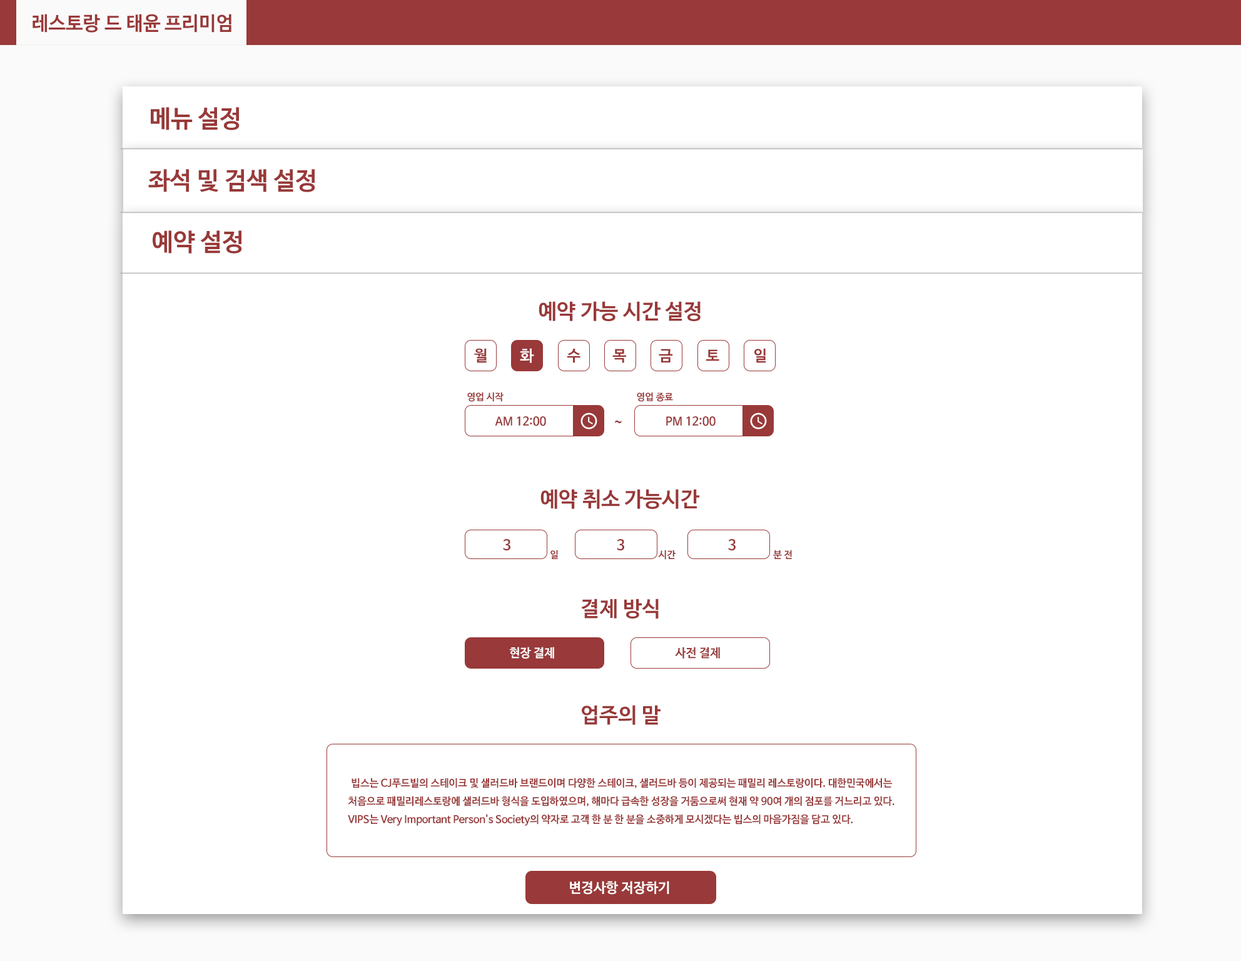
<style>
.page{position:relative;width:1241px;height:961px;background:#ffffff}
.page>*{position:absolute;margin:0}
.t1{font:19.3px "NanumBarunGothicBold";color:#993939}
.t2{font:24.5px "NanumBarunGothicBold";color:#993939}
.t3{font:21px "NanumBarunGothicBold";color:#993939}
.t4{font:15.3px "NanumBarunGothicBold";color:#993939}
.t5{font:15.3px "NanumBarunGothicBold";color:#ffffff}
.t6{font:9.6px "NanumBarunGothicBold";color:#993939}
.t7{font:11.7px "NanumBarunGothicBold";color:#993939}
.t8{font:14.2px "NanumBarunGothicBold";color:#993939}
.t9{font:12px "NanumBarunGothicBold";color:#ffffff}
.t10{font:12px "NanumBarunGothicBold";color:#993939}
.t11{font:10.3px/18px "NanumBarunGothicBold";color:#993939}
.t12{font:13.8px "NanumBarunGothicBold";color:#ffffff}
</style>
<div class="page">
<p class="t1" style="left:33px;top:14px;width:199px;height:19px">레스토랑 드 태윤 프리미엄</p>
<p class="t2" style="left:151px;top:107px;width:89px;height:23px">메뉴 설정</p>
<p class="t2" style="left:148px;top:169px;width:167px;height:23px">좌석 및 검색 설정</p>
<p class="t2" style="left:153px;top:230px;width:89px;height:23px">예약 설정</p>
<p class="t3" style="left:539px;top:301px;width:162px;height:20px">예약 가능 시간 설정</p>
<p class="t4" style="left:474px;top:348px;width:13px;height:15px">월</p>
<p class="t5" style="left:520px;top:348px;width:14px;height:15px">화</p>
<p class="t4" style="left:567px;top:349px;width:14px;height:14px">수</p>
<p class="t4" style="left:613px;top:349px;width:13px;height:14px">목</p>
<p class="t4" style="left:659px;top:349px;width:14px;height:13px">금</p>
<p class="t4" style="left:706px;top:349px;width:14px;height:12px">토</p>
<p class="t4" style="left:755px;top:348px;width:12px;height:15px">일</p>
<p class="t6" style="left:467px;top:392px;width:37px;height:10px">영업 시작</p>
<p class="t6" style="left:637px;top:392px;width:36px;height:10px">영업 종료</p>
<p class="t7" style="left:495px;top:416px;width:51px;height:10px">AM 12:00</p>
<p class="t8" style="left:615px;top:420px;width:7px;height:3px">~</p>
<p class="t7" style="left:666px;top:416px;width:50px;height:10px">PM 12:00</p>
<p class="t3" style="left:541px;top:489px;width:159px;height:20px">예약 취소 가능시간</p>
<p class="t8" style="left:503px;top:539px;width:8px;height:12px">3</p>
<p class="t8" style="left:617px;top:539px;width:7px;height:12px">3</p>
<p class="t8" style="left:728px;top:539px;width:8px;height:12px">3</p>
<p class="t6" style="left:551px;top:549px;width:7px;height:10px">일</p>
<p class="t6" style="left:658px;top:549px;width:18px;height:10px">시간</p>
<p class="t6" style="left:773px;top:549px;width:19px;height:10px">분 전</p>
<p class="t3" style="left:581px;top:598px;width:78px;height:20px">결제 방식</p>
<p class="t9" style="left:510px;top:646px;width:44px;height:12px">현장 결제</p>
<p class="t10" style="left:675px;top:646px;width:45px;height:12px">사전 결제</p>
<p class="t3" style="left:582px;top:705px;width:79px;height:20px">업주의 말</p>
<p class="t11" style="left:348px;top:778px;width:547px;height:47px">빕스는 CJ푸드빌의 스테이크 및 샐러드바 브랜드이며 다양한 스테이크, 샐러드바 등이 제공되는 패밀리 레스토랑이다. 대한민국에서는 처음으로 패밀리레스토랑에 샐러드바 형식을 도입하였으며, 해마다 급속한 성장을 거둠으로써 현재 약 90여 개의 점포를 거느리고 있다. VIPS는 Very Important Person's Society의 약자로 고객 한 분 한 분을 소중하게 모시겠다는 빕스의 마음가짐을 담고 있다.</p>
<p class="t12" style="left:570px;top:880px;width:100px;height:14px">변경사항 저장하기</p>
</div>
